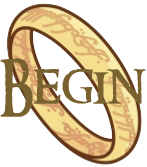
<style>
.page{position:relative;width:147px;height:167px;background:#ffffff}
.page>*{position:absolute;margin:0}
.t1{font:55.6px "RingbearerMedium";color:#796230}
</style>
<div class="page">
<p class="t1" style="left:0px;top:58px;width:146px;height:59px">Begin</p>
</div>
